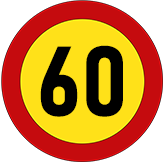
<style>
.page{position:relative;width:164px;height:164px;background:#ffe119}
.page>*{position:absolute;margin:0}
.t1{font:97.9px "Bahnschrift-BoldSemiCondensed";color:#000000}
</style>
<div class="page">
<p class="t1" style="left:40px;top:45px;width:83px;height:72px">60</p>
</div>
